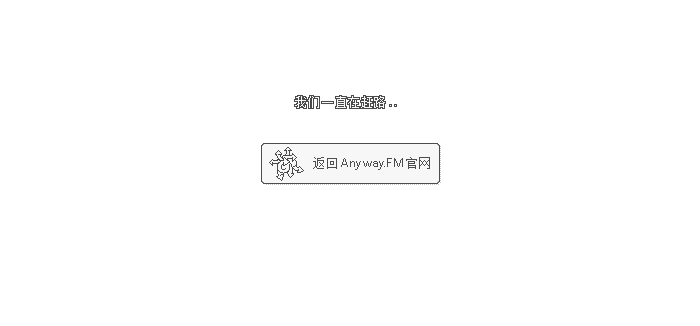
<style>
.page{position:relative;width:700px;height:326px;background:#ffffff}
.page>*{position:absolute;margin:0}
.t1{font:12px "FZXS12--GB1-0";letter-spacing:0.1em;color:#f7f7f7}
.t2{font:12px "Avenir-Book";color:#4d4d4d}
.t3{font:12px "FZXS12--GB1-0";letter-spacing:0.1em;color:#4d4d4d}
</style>
<div class="page">
<p class="t1" style="left:295px;top:96px;width:90px;height:12px">我们一直在赶路</p>
<p class="t2" style="left:313px;top:157px;width:117px;height:13px"><span class="t3">返回</span>Anyway.FM<span class="t3">官网</span></p>
</div>
